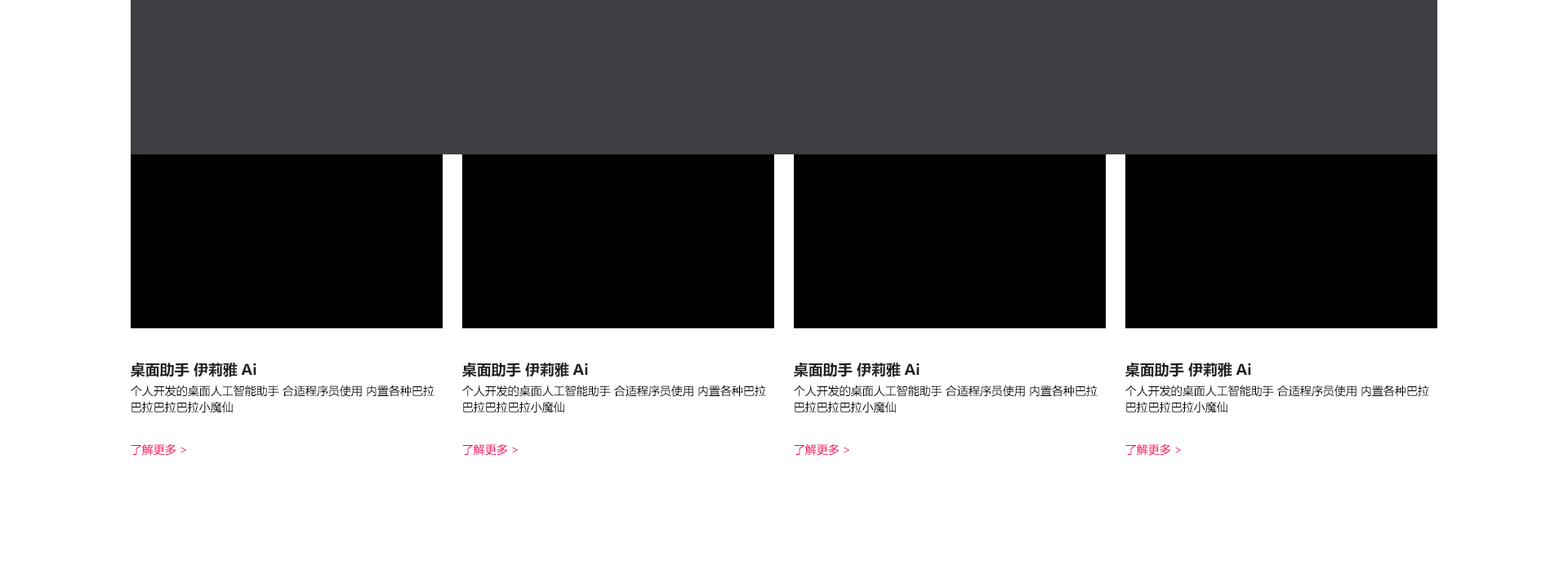
<style>
.page{position:relative;width:1568px;height:588px;background:#ffffff}
.page>*{position:absolute;margin:0}
.t1{font:14.7px "MicrosoftYaHeiUI-Bold";color:#202020}
.t2{font:11.4px/16.3px "MicrosoftYaHeiUILight";color:#000000}
.t3{font:11.4px "MicrosoftYaHeiUILight";color:#f8005d}
</style>
<div class="page">
<p class="t1" style="left:131px;top:362px;width:125px;height:15px">桌面助手 伊莉雅Ai</p>
<p class="t1" style="left:462px;top:362px;width:126px;height:15px">桌面助手 伊莉雅Ai</p>
<p class="t1" style="left:794px;top:362px;width:126px;height:15px">桌面助手 伊莉雅Ai</p>
<p class="t1" style="left:1125px;top:362px;width:126px;height:15px">桌面助手 伊莉雅Ai</p>
<p class="t2" style="left:131px;top:385px;width:303px;height:28px">个人开发的桌面人工智能助手 合适程序员使用 内置各种巴拉巴拉巴拉巴拉小魔仙</p>
<p class="t2" style="left:462px;top:385px;width:304px;height:28px">个人开发的桌面人工智能助手 合适程序员使用 内置各种巴拉巴拉巴拉巴拉小魔仙</p>
<p class="t2" style="left:794px;top:385px;width:304px;height:28px">个人开发的桌面人工智能助手 合适程序员使用 内置各种巴拉巴拉巴拉巴拉小魔仙</p>
<p class="t2" style="left:1125px;top:385px;width:304px;height:28px">个人开发的桌面人工智能助手 合适程序员使用 内置各种巴拉巴拉巴拉巴拉小魔仙</p>
<p class="t3" style="left:131px;top:443px;width:55px;height:13px">了解更多 &gt;</p>
<p class="t3" style="left:462px;top:443px;width:56px;height:13px">了解更多 &gt;</p>
<p class="t3" style="left:794px;top:443px;width:55px;height:13px">了解更多 &gt;</p>
<p class="t3" style="left:1125px;top:443px;width:56px;height:13px">了解更多 &gt;</p>
</div>
